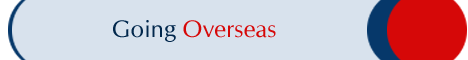
<style>
.page{position:relative;width:468px;height:60px;background:#d8e2ed}
.page>*{position:absolute;margin:0}
.t1{font:24px "CGOmega";color:#d60808}
.t2{font:24px "CGOmega";color:#01274c}
</style>
<div class="page">
<p class="t1" style="left:112px;top:19px;width:164px;height:29px"><span class="t2">Going </span>Overseas</p>
</div>
